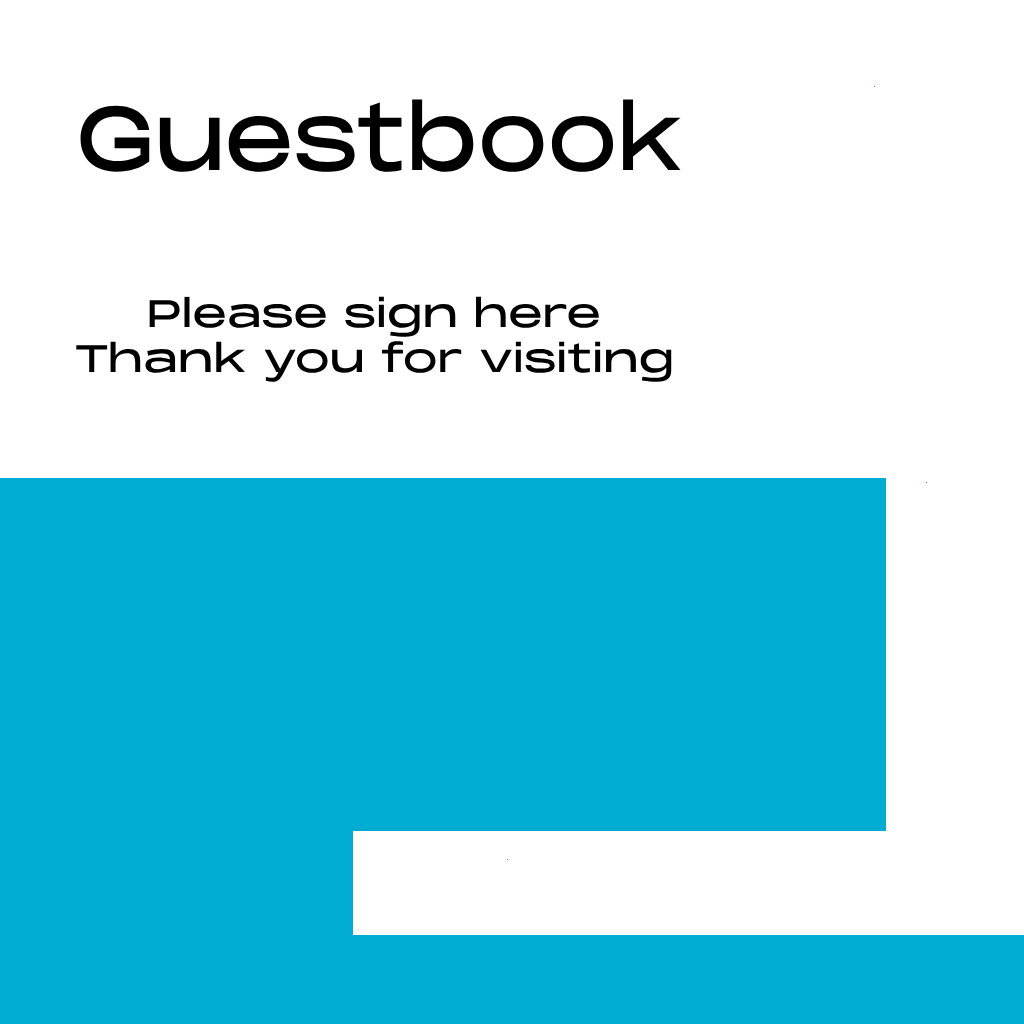
<style>
.page{position:relative;width:1024px;height:1024px;background:#ffffff}
.page>*{position:absolute;margin:0}
.t1{font:88.3px "PPMonumentExtended-Regular";color:#000000;scale:0.85 1}
.t2{font:37.7px "PPMonumentExtended-Regular";color:#000000}
</style>
<div class="page">
<p class="t1" style="left:80px;top:99px;width:601px;height:73px">Guestbook</p>
<p class="t2" style="left:76px;top:296px;width:596px;height:86px;text-align:center">Please sign here<br>Thank you for visiting</p>
</div>
